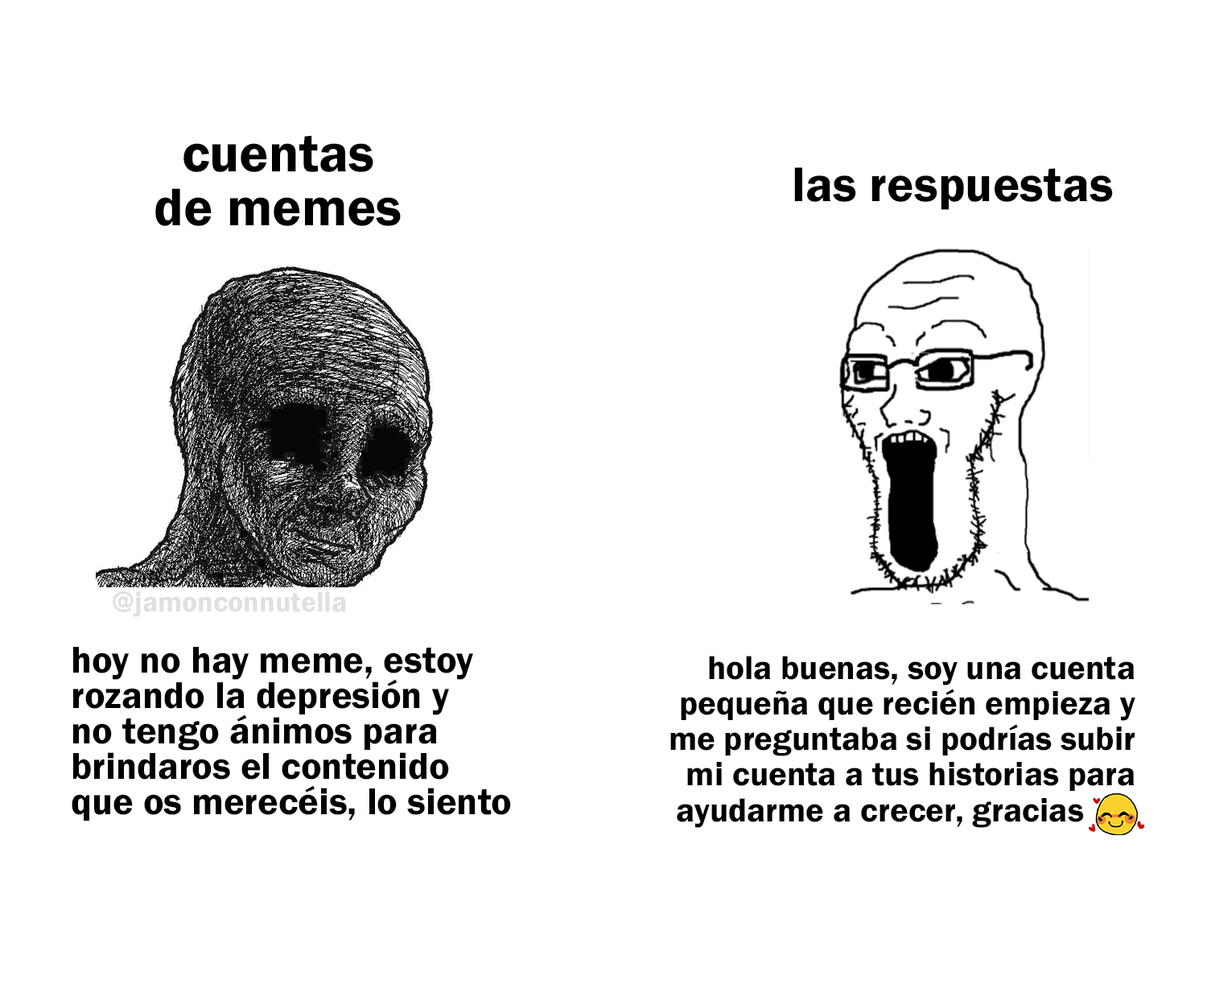
<style>
.page{position:relative;width:1207px;height:988px;background:#ffffff}
.page>*{position:absolute;margin:0}
.t1{font:55px "FranklinGothic-Demi";color:#000000}
.t2{font:50.6px "FranklinGothic-Demi";color:#000000}
.t3{font:28.9px "FranklinGothic-Demi";color:#e0e0e0}
.t4{font:38.6px "FranklinGothic-Demi";color:#000000}
.t5{font:34.4px "FranklinGothic-Demi";color:#000000}
</style>
<div class="page">
<p class="t1" style="left:155px;top:135px;width:246px;height:91px;text-align:center">cuentas<br>de memes</p>
<p class="t2" style="left:794px;top:167px;width:319px;height:43px">las respuestas</p>
<p class="t3" style="left:113px;top:591px;width:233px;height:26px">@jamonconnutella</p>
<p class="t4" style="left:72px;top:647px;width:439px;height:174px">hoy no hay meme, estoy<br>rozando la depresión y <br>no tengo ánimos para<br>brindaros el contenido<br>que os merecéis, lo siento</p>
<p class="t5" style="left:670px;top:656px;width:465px;height:172px;text-align:right">hola buenas, soy una cuenta<br>pequeña que recién empieza y<br>me preguntaba si podrías subir<br>mi cuenta a tus historias para<br>ayudarme a crecer, gracias</p>
</div>
